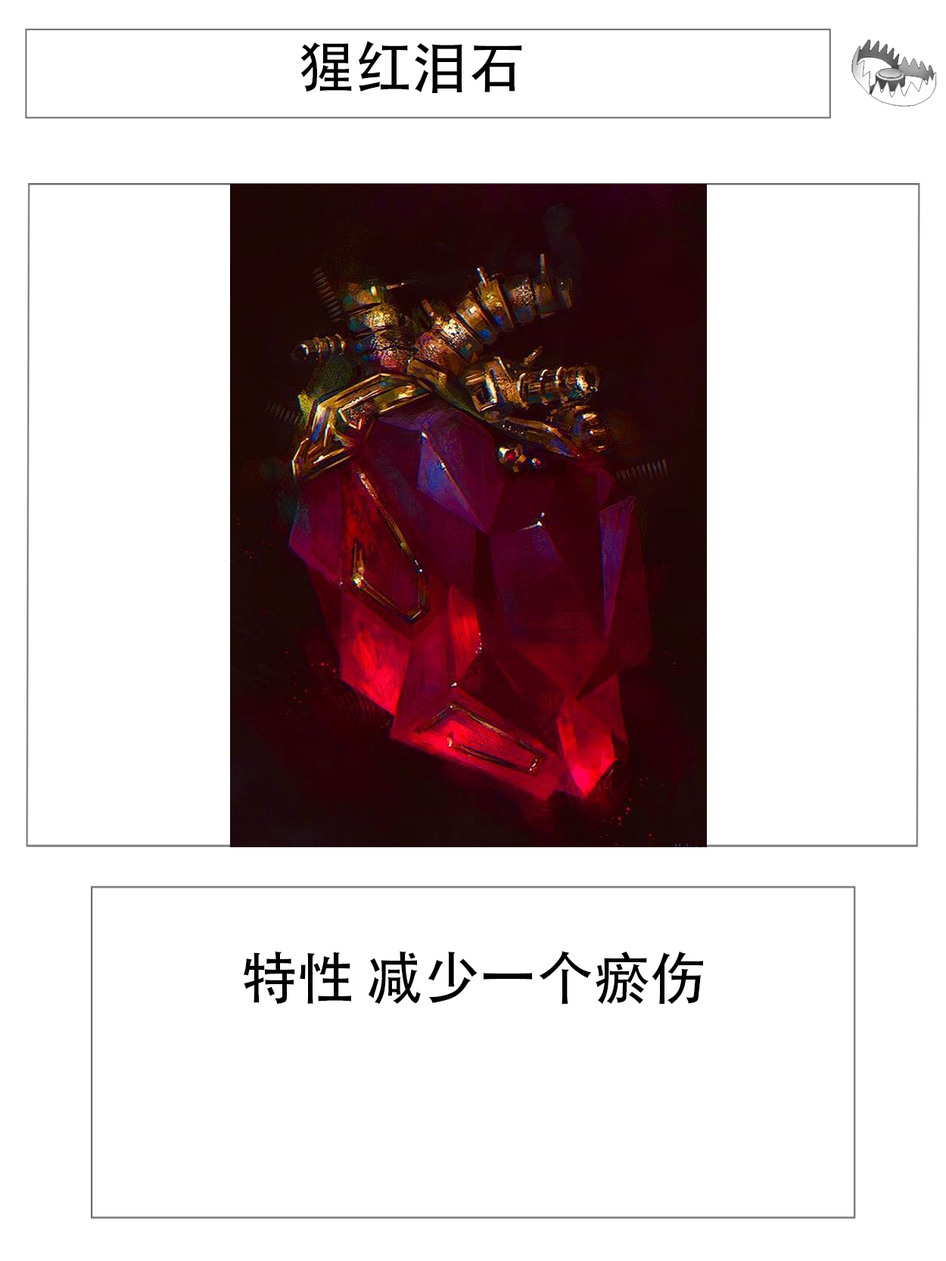
<style>
.page{position:relative;width:946px;height:1261px;background:#ffffff}
.page>*{position:absolute;margin:0}
.t1{font:56.7px "AdobeHeitiStd-Regular";color:#000000}
</style>
<div class="page">
<p class="t1" style="left:300px;top:41px;width:222px;height:52px">猩红泪石</p>
<p class="t1" style="left:243px;top:951px;width:460px;height:54px">特性 减少一个瘀伤</p>
</div>
